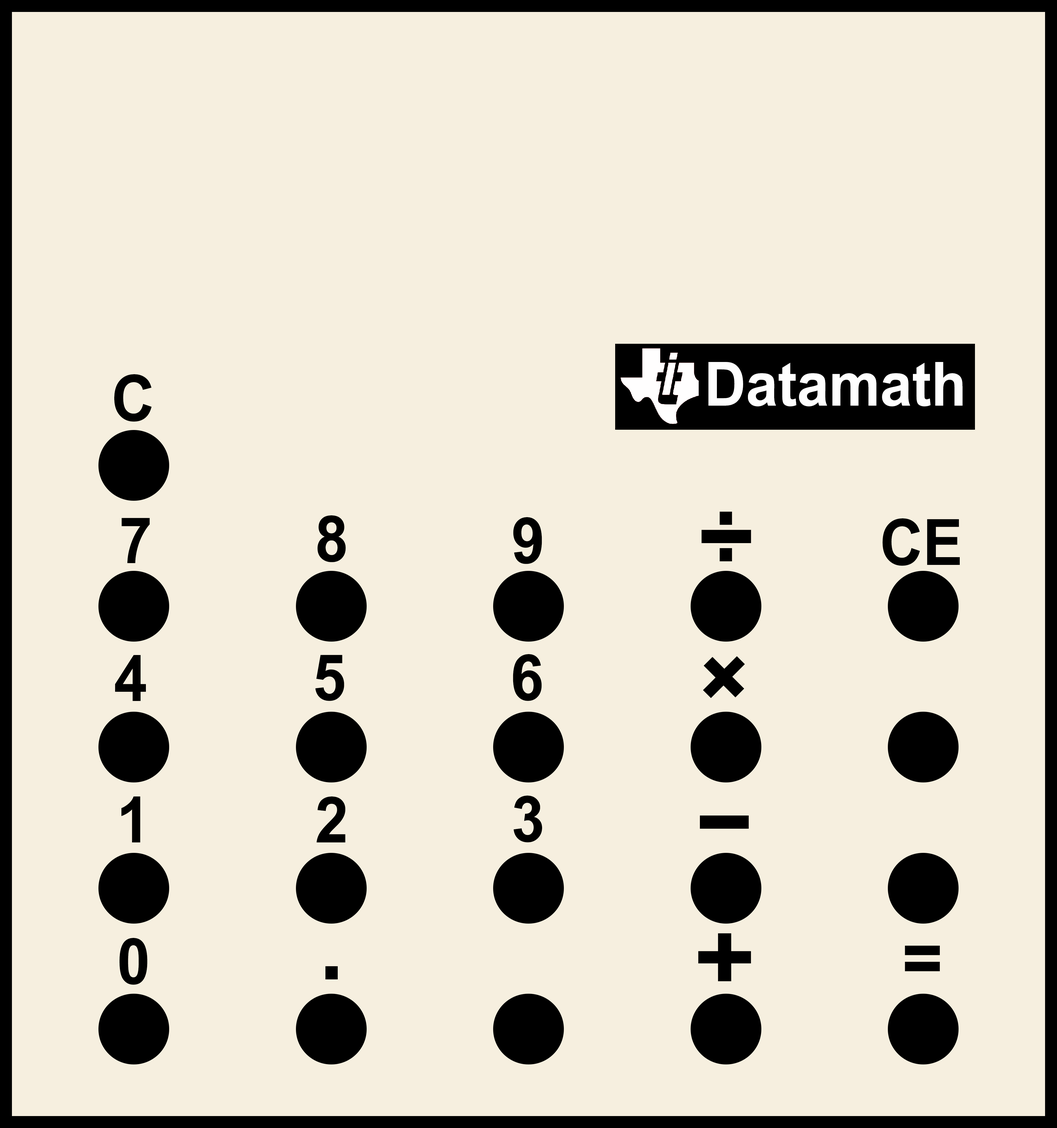
<style>
.page{position:relative;width:1057px;height:1128px;background:#f6efdf}
.page>*{position:absolute;margin:0}
.t1{font:60.9px "Arial-BoldMT";color:#fefefe;scale:0.94 1}
.t2{font:63.9px "Arial-BoldMT";color:#000000;scale:0.93 1}
.t3{font:95.8px "Arial-BoldMT";color:#000000;scale:0.93 1}
.t4{font:95.8px "Arial-BoldMT";color:#000000;scale:1.91 1}
.t5{font:95.7px "Arial-BoldMT";color:#000000;scale:1.89 1}
.t6{font:95.7px "Arial-BoldMT";color:#000000;scale:1.1 1}
.t7{font:74.5px "Arial-BoldMT";color:#000000;scale:0.93 1}
</style>
<div class="page">
<p class="t1" style="left:708px;top:362px;width:255px;height:44px">Datamath</p>
<p class="t2" style="left:114px;top:374px;width:38px;height:48px">C</p>
<p class="t2" style="left:121px;top:518px;width:29px;height:45px">7</p>
<p class="t2" style="left:317px;top:515px;width:29px;height:47px">8</p>
<p class="t2" style="left:513px;top:517px;width:29px;height:47px">9</p>
<p class="t3" style="left:720px;top:511px;width:12px;height:50px">:</p>
<p class="t2" style="left:883px;top:518px;width:77px;height:48px">CE</p>
<p class="t4" style="left:702px;top:530px;width:49px;height:13px">-</p>
<p class="t2" style="left:115px;top:655px;width:31px;height:46px">4</p>
<p class="t2" style="left:315px;top:655px;width:29px;height:46px">5</p>
<p class="t2" style="left:513px;top:654px;width:29px;height:47px">6</p>
<p class="t3" style="left:703px;top:656px;width:42px;height:42px;rotate:45deg">+</p>
<p class="t2" style="left:121px;top:796px;width:19px;height:46px">1</p>
<p class="t2" style="left:317px;top:796px;width:29px;height:46px">2</p>
<p class="t2" style="left:514px;top:796px;width:28px;height:46px">3</p>
<p class="t5" style="left:700px;top:815px;width:49px;height:14px">-</p>
<p class="t2" style="left:119px;top:938px;width:28px;height:47px">0</p>
<p class="t6" style="left:698px;top:933px;width:53px;height:48px">+</p>
<p class="t7" style="left:905px;top:946px;width:35px;height:25px">=</p>
<p class="t3" style="left:325px;top:966px;width:13px;height:13px">.</p>
</div>
